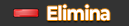
<style>
.page{position:relative;width:129px;height:26px;background:#333333}
.page>*{position:absolute;margin:0}
.t1{font:19.4px "Montserrat-Bold";letter-spacing:-0.04em;color:#ffffff;scale:0.9 1}
</style>
<div class="page">
<p class="t1" style="left:47px;top:4px;width:63px;height:17px">Elimina</p>
</div>
